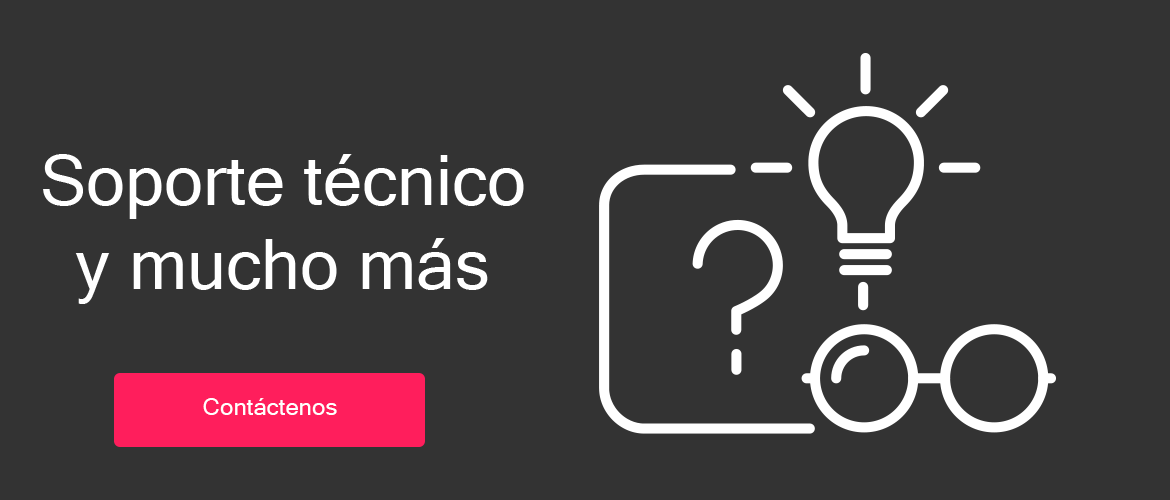
<style>
.page{position:relative;width:1170px;height:500px;background:#333333}
.page>*{position:absolute;margin:0}
.t1{font:70px "MicrosoftSansSerif";color:#ffffff}
.t2{font:24px "MicrosoftSansSerif";color:#ffffff}
</style>
<div class="page">
<p class="t1" style="left:43px;top:154px;width:481px;height:150px;text-align:center">Soporte técnico y mucho más</p>
<p class="t2" style="left:203px;top:398px;width:134px;height:17px">Contáctenos</p>
</div>
